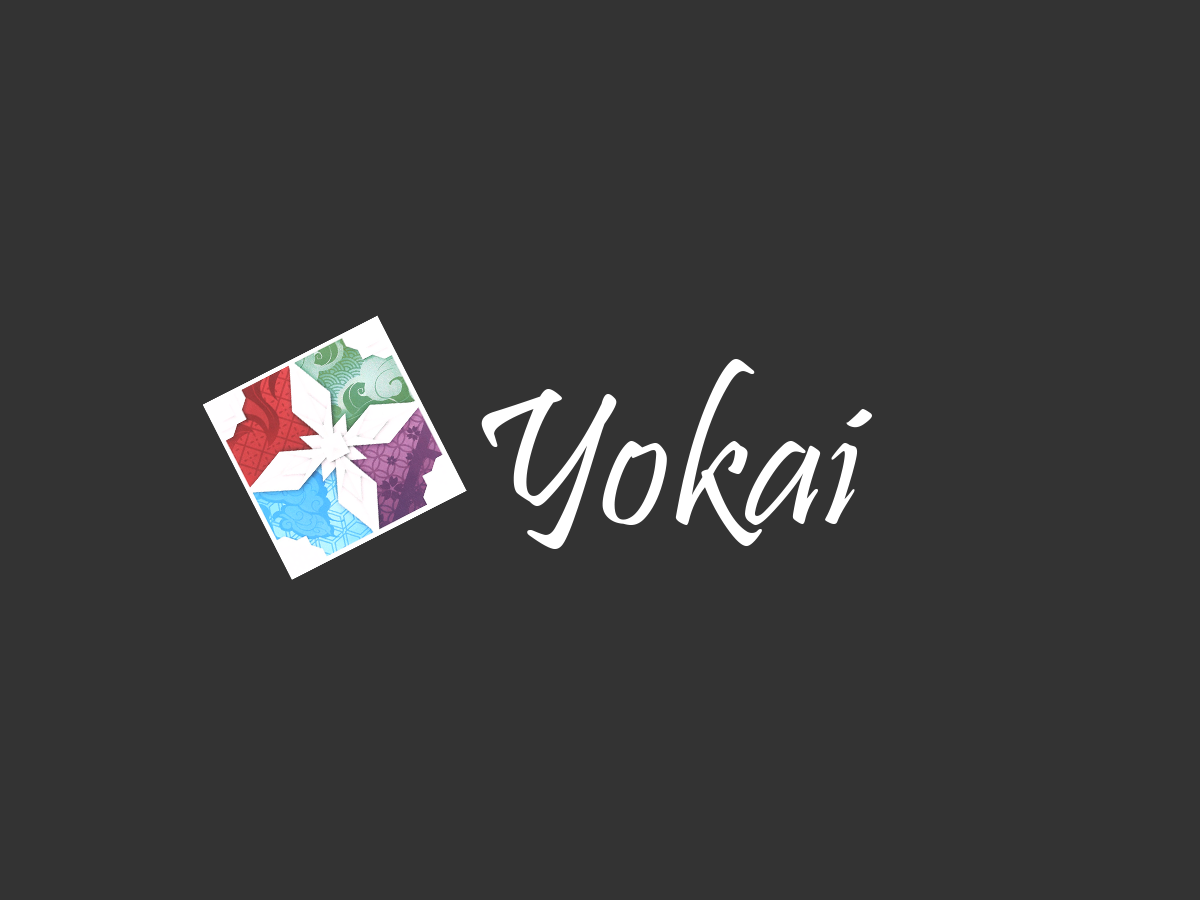
<style>
.page{position:relative;width:1200px;height:900px;background:#333333}
.page>*{position:absolute;margin:0}
.t1{font:200px "Pristina-Regular";color:#ffffff}
</style>
<div class="page">
<p class="t1" style="left:481px;top:359px;width:391px;height:190px">Yokai</p>
</div>
